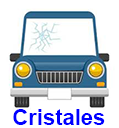
<style>
.page{position:relative;width:119px;height:128px;background:#ffffff}
.page>*{position:absolute;margin:0}
.t1{font:22px "Arial-BoldMT";color:#0000ff}
</style>
<div class="page">
<p class="t1" style="left:13px;top:109px;width:92px;height:16px">Cristales</p>
</div>
